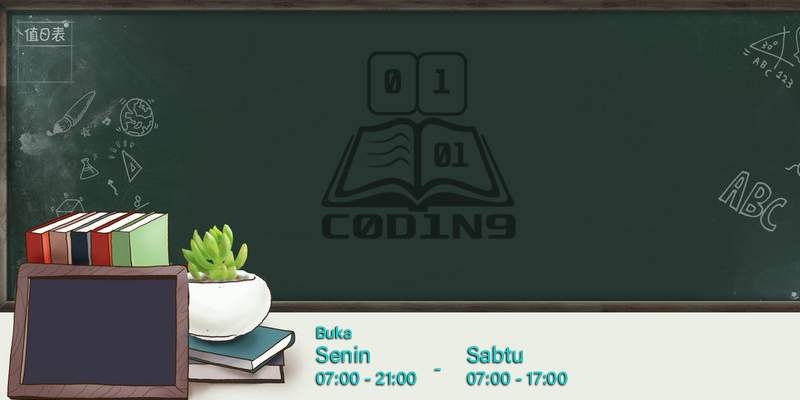
<style>
.page{position:relative;width:800px;height:400px;background:#263731}
.page>*{position:absolute;margin:0}
.t1{font:16.2px "AcuminConcept-Regular";color:#19cec8}
.t2{font:18.2px "AcuminConcept-Regular";color:#19cfc9}
.t3{font:22.2px "AcuminConcept-Regular";color:#19cfc9}
.t4{font:18.2px "AcuminConcept-Regular";color:#19cec8}
.t5{font:22.2px "AcuminConcept-Regular";color:#19cec8}
.t6{font:24.3px "MyriadPro-Regular";color:#19cfc9}
</style>
<div class="page">
<p class="t1" style="left:317px;top:326px;width:35px;height:13px">Buka</p>
<p class="t2" style="left:316px;top:345px;width:101px;height:40px"><span class="t3">Senin<br></span>07:00 - 21:00</p>
<p class="t4" style="left:467px;top:345px;width:101px;height:40px"><span class="t5">Sabtu<br></span>07:00 - 17:00</p>
<p class="t6" style="left:435px;top:368px;width:6px;height:2px">-</p>
</div>
